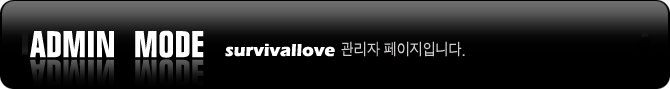
<style>
.page{position:relative;width:670px;height:89px;background:#000000}
.page>*{position:absolute;margin:0}
.t1{font:16px "SandJg";color:#cfcdcd;scale:0.9 1}
.t2{font:18px "ErasITC-Bold";color:#ffffff}
</style>
<div class="page">
<p class="t1" style="left:341px;top:41px;width:124px;height:16px">관리자 페이지입니다.</p>
<p class="t2" style="left:225px;top:43px;width:110px;height:14px">survivallove</p>
</div>
